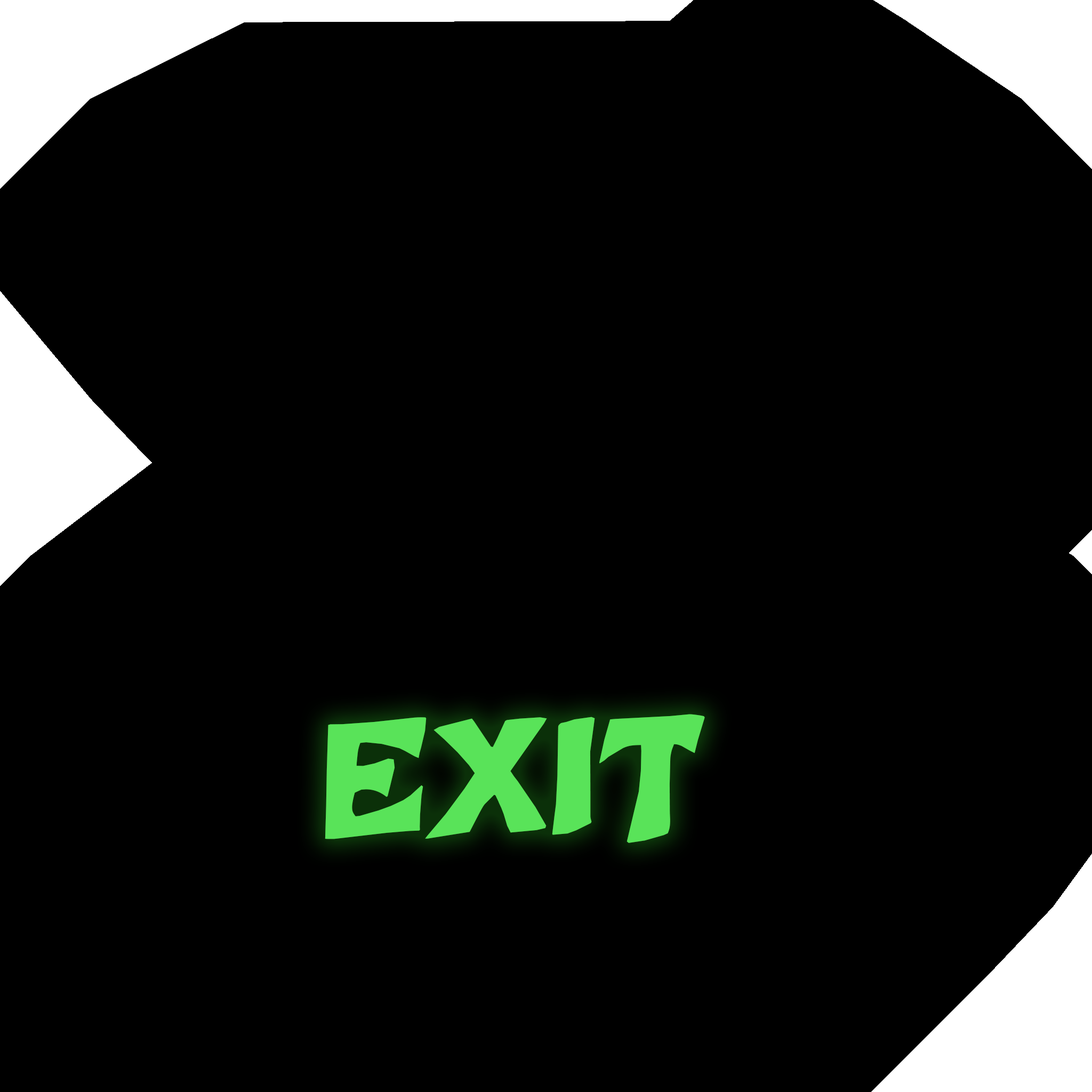
<style>
.page{position:relative;width:1092px;height:1092px;background:#000000}
.page>*{position:absolute;margin:0}
.t1{font:160px "Tarzan";color:#59e359}
</style>
<div class="page">
<p class="t1" style="left:325px;top:714px;width:380px;height:129px">EXIT</p>
</div>
